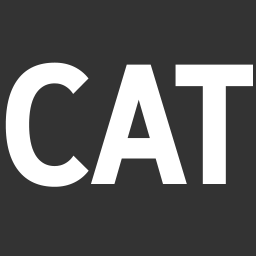
<style>
.page{position:relative;width:256px;height:256px;background:#333333}
.page>*{position:absolute;margin:0}
.t1{font:153px "DeansgateCondensed-Bold";letter-spacing:-0.1em;color:#ffffff}
</style>
<div class="page">
<p class="t1" style="left:5px;top:62px;width:248px;height:125px">CAT</p>
</div>
